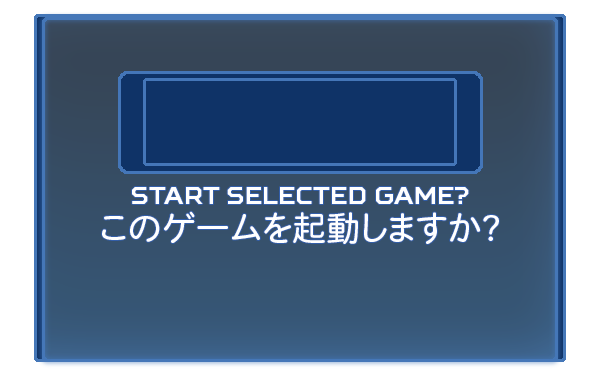
<style>
.page{position:relative;width:608px;height:379px}
.page>*{position:absolute;margin:0}
.t1{font:24px "SquaresBold";color:#ffffff}
.t2{font:34px "HeiseiMaruGoStd-W4";color:#ffffff}
</style>
<div class="page">
<p class="t1" style="left:132px;top:187px;width:337px;height:17px">Start selected Game?</p>
<p class="t2" style="left:102px;top:211px;width:397px;height:33px">このゲ一ムを起動しますか?</p>
</div>
